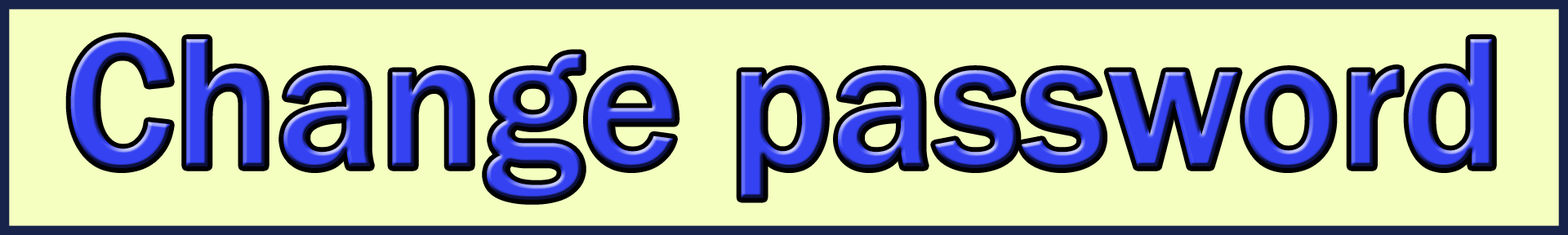
<style>
.page{position:relative;width:1568px;height:235px;background:#f4ffc0}
.page>*{position:absolute;margin:0}
.t1{font:190.3px "FranklinGothic-Medium";color:#3442f2}
</style>
<div class="page">
<p class="t1" style="left:70px;top:37px;width:1422px;height:163px">Change password</p>
</div>
